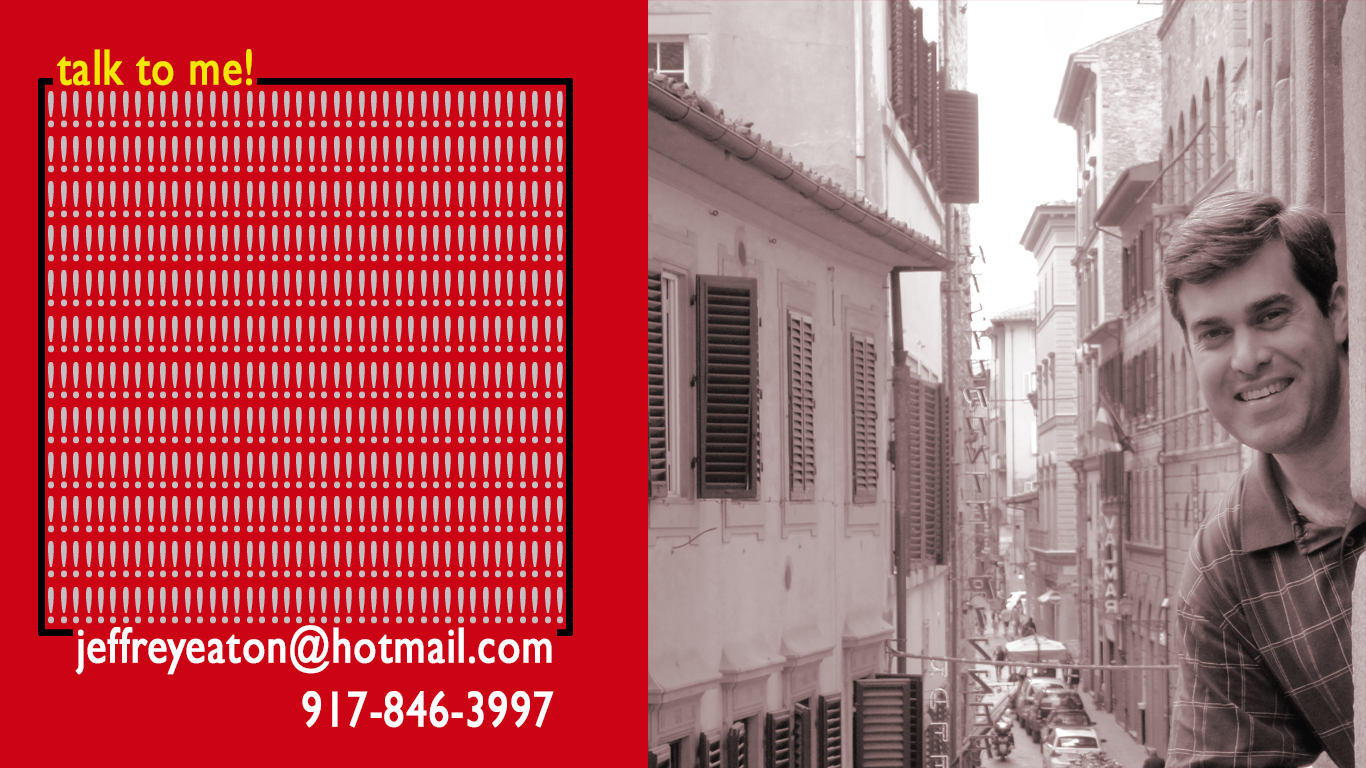
<style>
.page{position:relative;width:1366px;height:768px;background:#cc0215}
.page>*{position:absolute;margin:0}
.t1{font:50.4px "GillSansMT";letter-spacing:0.01em;color:#f3e504;font-weight:bold;scale:0.81 1}
.t2{font:50.4px/16px "GillSansMT";letter-spacing:0.01em;color:#ffffff;font-weight:bold;scale:0.81 1}
</style>
<div class="page">
<p class="t1" style="left:57px;top:49px;width:195px;height:37px">talk to me!</p>
<p class="t2" style="left:75px;top:625px;width:479px;height:103px;text-align:right">jeffreyeaton@hotmail.com<br><br><br><br>917-846-3997</p>
</div>
